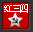
<style>
.page{position:relative;width:33px;height:32px;background:#c50000}
.page>*{position:absolute;margin:0}
.t1{font:10.4px "SimSun";letter-spacing:-0.25em;color:#ffffff}
</style>
<div class="page">
<p class="t1" style="left:4px;top:4px;width:24px;height:9px">红三四</p>
</div>
